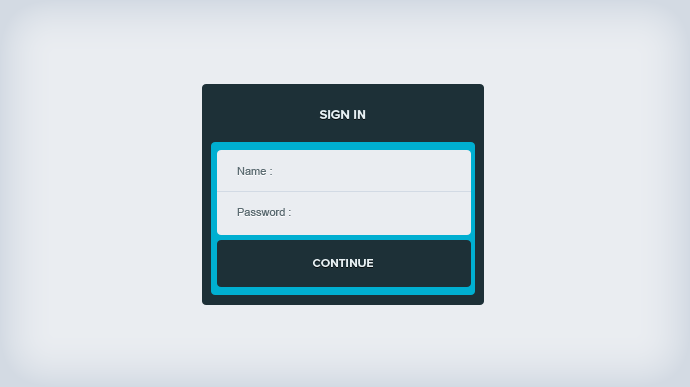
<style>
.page{position:relative;width:690px;height:387px;background:#eaedf1}
.page>*{position:absolute;margin:0}
.t1{font:13px "ProximaNova-Bold";color:#e6eff2;text-transform:uppercase}
.t2{font:11px "ArialMT";color:#5c6c72}
.t3{font:12px "ProximaNova-Bold";color:#e6eff2;text-transform:uppercase}
</style>
<div class="page">
<p class="t1" style="left:319px;top:110px;width:47px;height:9px">SIGN IN</p>
<p class="t2" style="left:237px;top:167px;width:35px;height:8px">Name :</p>
<p class="t2" style="left:237px;top:208px;width:54px;height:8px">Password :</p>
<p class="t3" style="left:313px;top:259px;width:60px;height:8px">CONTINUE</p>
</div>
